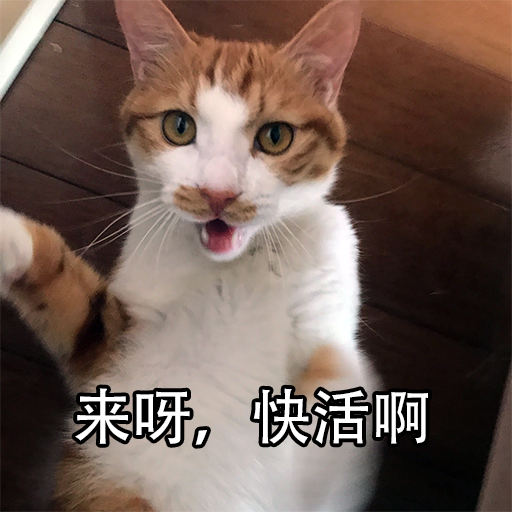
<style>
.page{position:relative;width:512px;height:512px}
.page>*{position:absolute;margin:0}
.t1{font:60px "AdobeHeitiStd-Regular";color:#ffffff}
</style>
<div class="page">
<p class="t1" style="left:75px;top:388px;width:353px;height:57px">来呀，快活啊</p>
</div>
